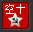
<style>
.page{position:relative;width:33px;height:32px;background:#c50000}
.page>*{position:absolute;margin:0}
.t1{font:10.8px "SimSun";color:#ffffff}
</style>
<div class="page">
<p class="t1" style="left:5px;top:4px;width:20px;height:10px">空十</p>
</div>
